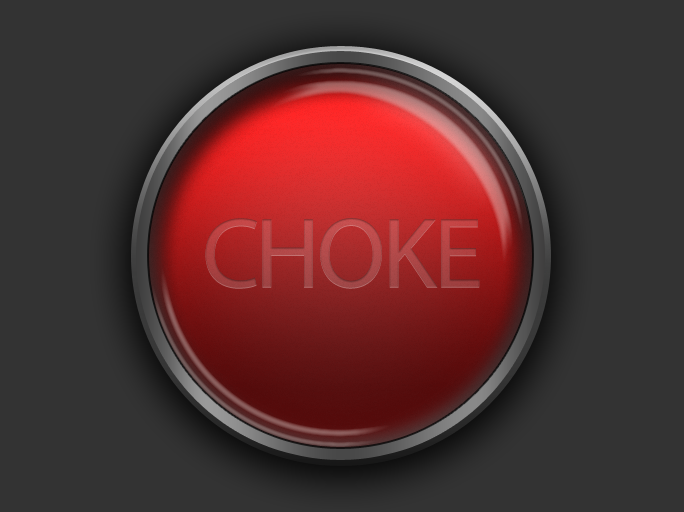
<style>
.page{position:relative;width:684px;height:512px;background:#333333}
.page>*{position:absolute;margin:0}
.t1{font:100px "MyriadPro-Regular";letter-spacing:-0.015em;color:#ae4646;text-transform:uppercase}
</style>
<div class="page">
<p class="t1" style="left:205px;top:218px;width:275px;height:70px">Choke</p>
</div>
